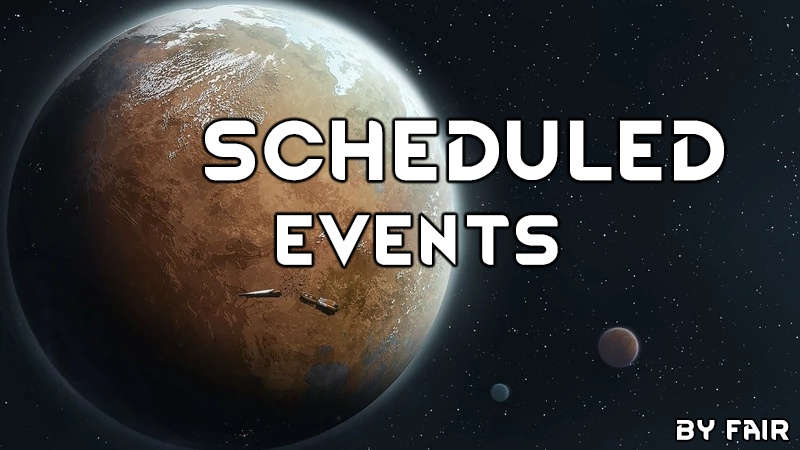
<style>
.page{position:relative;width:800px;height:450px}
.page>*{position:absolute;margin:0}
.t1{font:72px "RimWordFont";color:#ffffff}
.t2{font:60px "RimWordFont";color:#ffffff}
.t3{font:24px "RimWordFont";color:#ffffff}
</style>
<div class="page">
<p class="t1" style="left:205px;top:120px;width:519px;height:147px">Scheduled<br>  <span class="t2">events</span></p>
<p class="t3" style="left:677px;top:420px;width:112px;height:20px">by fair</p>
</div>
